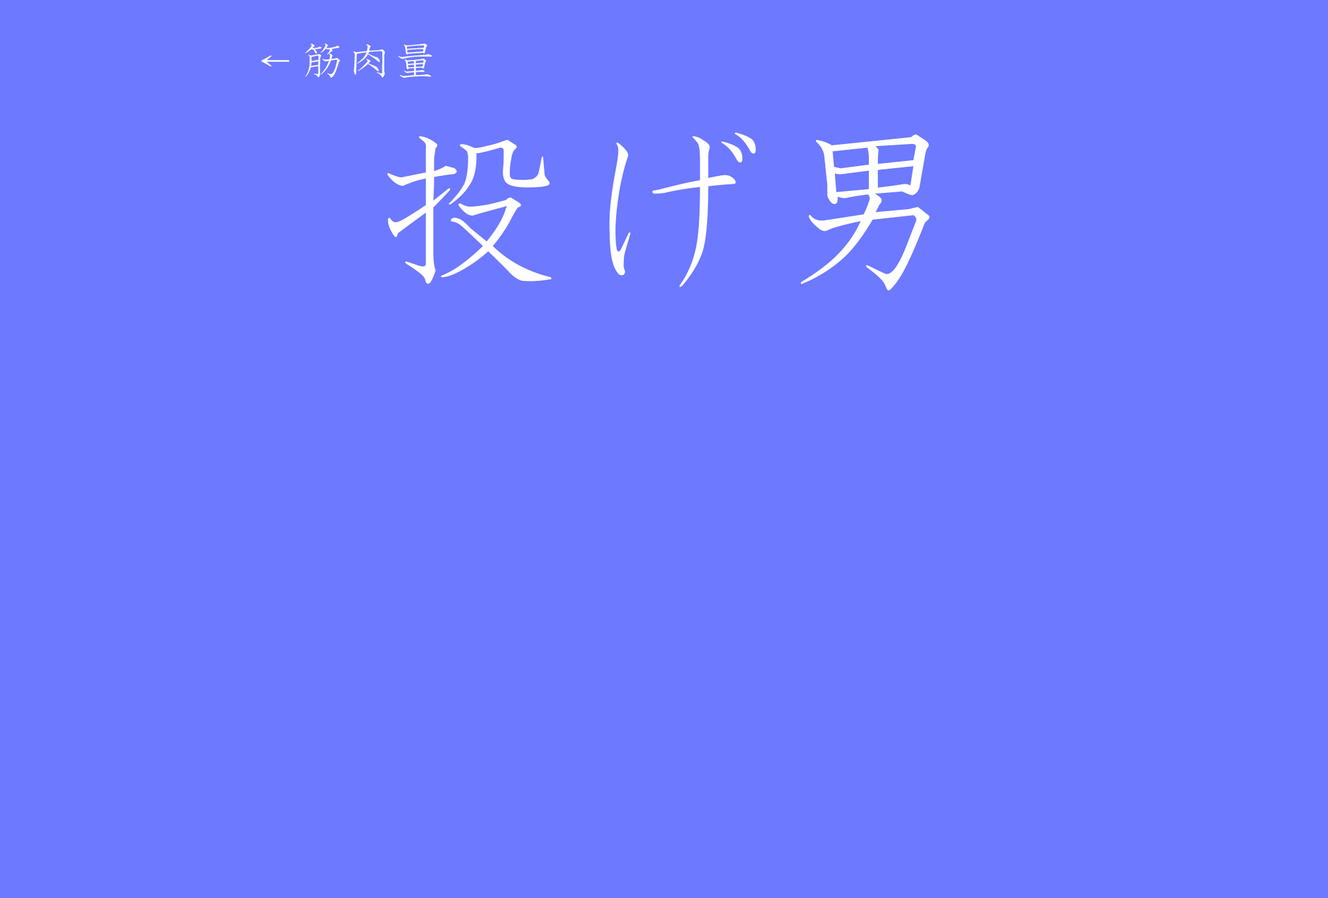
<style>
.page{position:relative;width:1328px;height:898px;background:#6d79ff}
.page>*{position:absolute;margin:0}
.t1{font:44.3px "HGSKyokashotai";letter-spacing:0.05em;color:#ffffff}
.t2{font:190px "HGSKyokashotai";letter-spacing:0.05em;color:#ffffff}
</style>
<div class="page">
<p class="t1" style="left:261px;top:43px;width:172px;height:35px">←筋肉量</p>
<p class="t2" style="left:387px;top:132px;width:543px;height:159px">投げ男</p>
</div>
